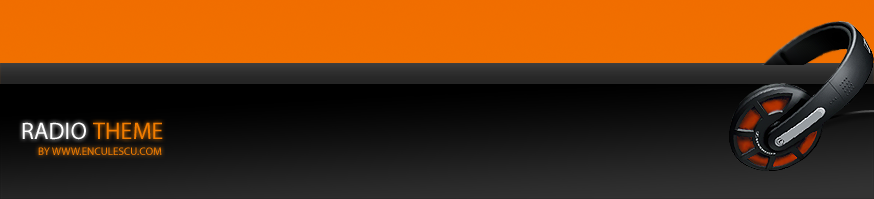
<style>
.page{position:relative;width:874px;height:199px}
.page>*{position:absolute;margin:0}
.t1{font:24px "MyriadPro-Regular";color:#ffffff;text-transform:uppercase}
.t2{font:24px "MyriadPro-Regular";color:#f27d00;text-transform:uppercase}
.t3{font:11px "MyriadPro-Regular";color:#f27d00;text-transform:uppercase}
</style>
<div class="page">
<p class="t1" style="left:22px;top:122px;width:64px;height:18px">RADIO</p>
<p class="t2" style="left:93px;top:122px;width:70px;height:17px">THEME</p>
<p class="t3" style="left:38px;top:147px;width:124px;height:8px"><span class="t2"><br></span>by www.enculescu.com</p>
</div>
